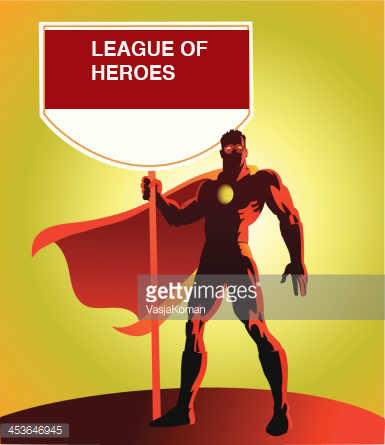
<style>
.page{position:relative;width:385px;height:445px}
.page>*{position:absolute;margin:0}
.t1{font:20px "Helvetica-Bold";color:#fbf6f6}
</style>
<div class="page">
<p class="t1" style="left:92px;top:41px;width:116px;height:39px">LEAGUE OF HEROES</p>
</div>
